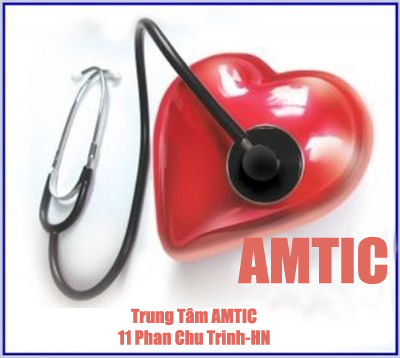
<style>
.page{position:relative;width:400px;height:358px}
.page>*{position:absolute;margin:0}
.t1{font:57.1px "Impact";color:#e06a60;scale:1.04 1}
.t2{font:18px "Impact";color:#e06a60}
</style>
<div class="page">
<p class="t1" style="left:238px;top:236px;width:150px;height:49px">AMTIC</p>
<p class="t2" style="left:117px;top:308px;width:153px;height:37px;text-align:center">Trung Tâm AMTIC<br>11 Phan Chu Trinh-HN</p>
</div>
